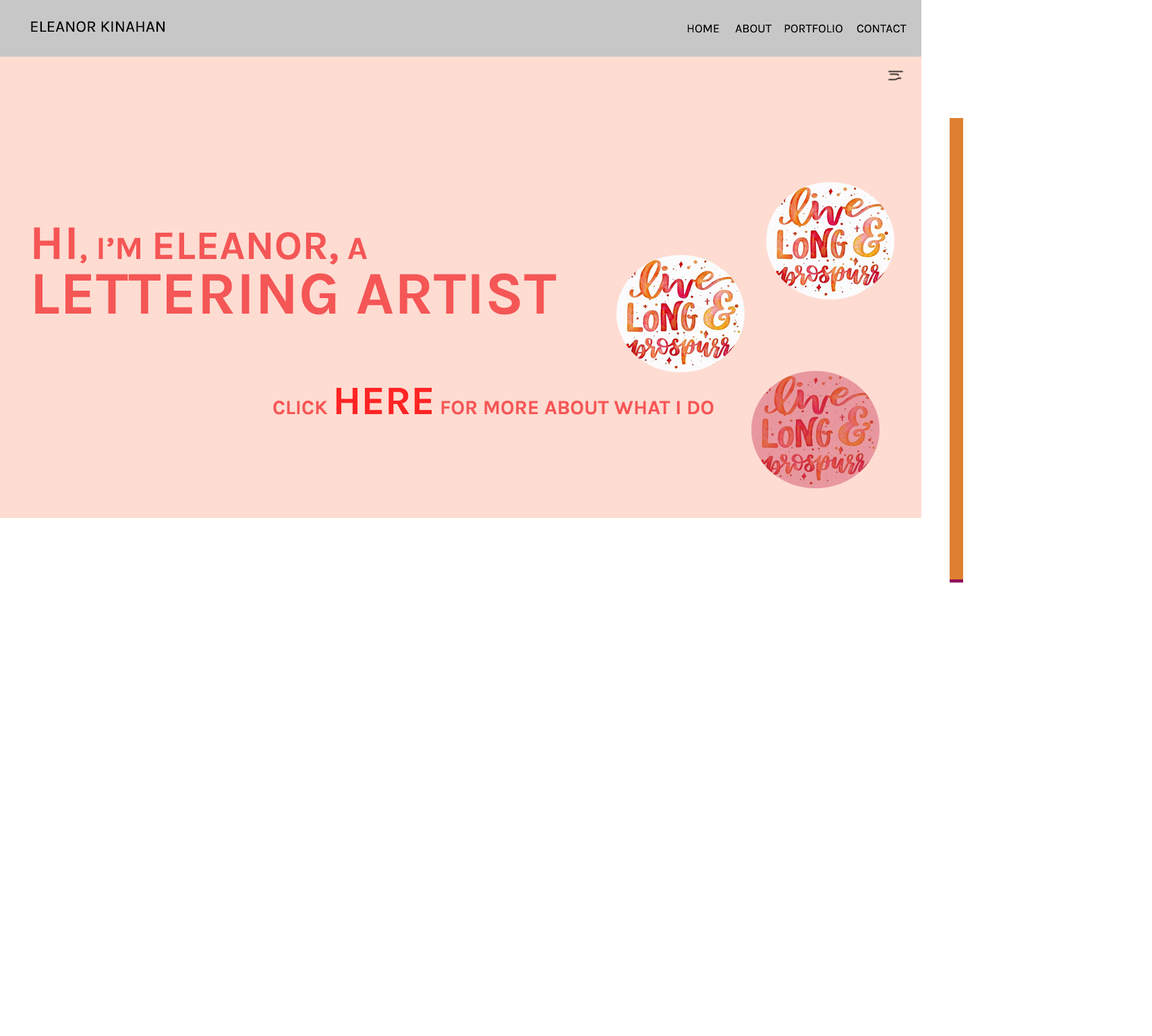
<style>
.page{position:relative;width:1152px;height:1036px;background:#ffffff}
.page>*{position:absolute;margin:0}
.t1{font:16.2px "Karla-Regular";color:#000000}
.t2{font:12.1px "Karla-Regular";color:#000000}
.t3{font:20.2px "Karla-Bold";color:#f55656}
.t4{font:48.5px/46.5px "Karla-Bold";letter-spacing:0.005em;color:#f55656}
.t5{font:32.4px/46.5px "Karla-Bold";letter-spacing:0.005em;color:#f55656}
.t6{font:40.5px/46.5px "Karla-Bold";letter-spacing:0.005em;color:#f55656}
.t7{font:60.7px/54.6px "Karla-Bold";letter-spacing:0.005em;color:#f55656}
.t8{font:40.5px "Karla-Bold";color:#ff2424}
</style>
<div class="page">
<p class="t1" style="left:31px;top:21px;width:134px;height:11px">ELEANOR KINAHAN</p>
<p class="t2" style="left:687px;top:24px;width:219px;height:9px">HOME  ABOUT  PORTFOLIO  CONTACT</p>
<p class="t3" style="left:34px;top:227px;width:679px;height:188px"><span class="t4">HI</span><span class="t5">, I’M </span><span class="t6">ELEANOR,</span><span class="t5"> A<br></span><span class="t7">LETTERING ARTIST <br><br>          </span>CLICK <span class="t8">HERE</span> FOR MORE ABOUT WHAT I DO</p>
</div>
